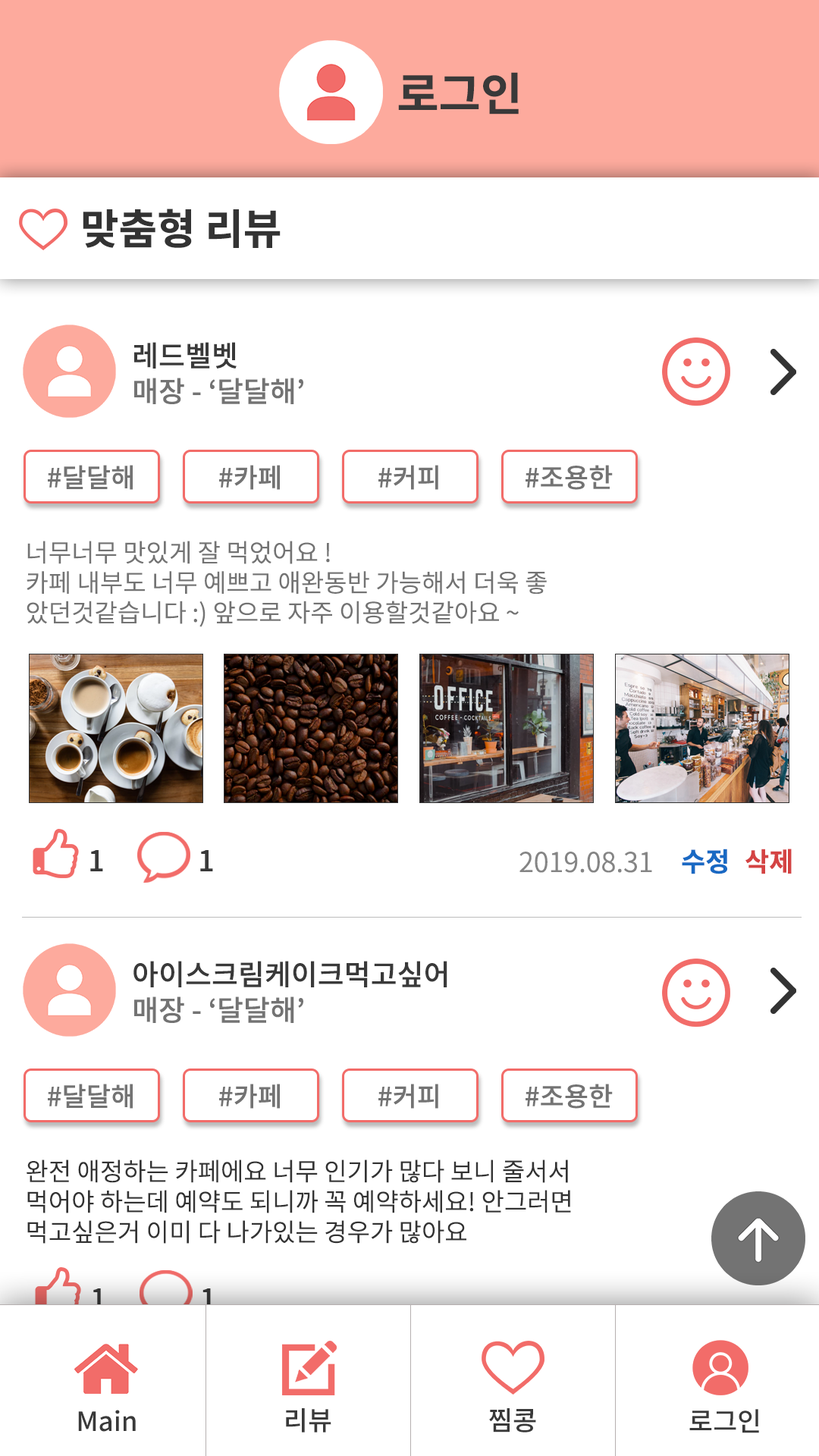
<style>
.page{position:relative;width:819px;height:1456px;background:#ffffff}
.page>*{position:absolute;margin:0}
.t1{font:45.5px "NotoSansCJKkr-Bold";color:#393939}
.t2{font:41.7px "NotoSansCJKkr-Bold";color:#333333}
.t3{font:28.8px "NotoSansCJKkr-Medium";color:#393939}
.t4{font:28.8px "NotoSansCJKkr-Medium";color:#737373}
.t5{font:26.5px "NotoSansCJKkr-Medium";color:#737373}
.t6{font:25px "NotoSansCJKkr-DemiLight";color:#737373}
.t7{font:27.3px "NotoSansCJKkr-DemiLight";color:#858585}
.t8{font:26.5px "NotoSansCJKkr-Bold";color:#1969c3}
.t9{font:26.5px "NotoSansCJKkr-Bold";color:#d44343}
.t10{font:25px/30.3px "NotoSansCJKkr-DemiLight";color:#333333}
.t11{font:28.8px "NotoSansCJKkr-Medium"}
.t12{font:26.5px "NotoSansKR-Medium";color:#393939}
</style>
<div class="page">
<p class="t1" style="left:398px;top:72px;width:121px;height:43px">로그인</p>
<p class="t2" style="left:83px;top:209px;width:198px;height:39px">맞춤형 리뷰</p>
<p class="t3" style="left:134px;top:342px;width:103px;height:27px">레드벨벳</p>
<p class="t4" style="left:134px;top:378px;width:169px;height:26px">매장 - ‘달달해’</p>
<p class="t5" style="left:48px;top:465px;width:85px;height:25px">#달달해</p>
<p class="t5" style="left:219px;top:465px;width:61px;height:25px">#카페</p>
<p class="t5" style="left:378px;top:465px;width:60px;height:25px">#커피</p>
<p class="t5" style="left:526px;top:465px;width:87px;height:25px">#조용한</p>
<p class="t6" style="left:27px;top:541px;width:520px;height:86px">너무너무 맛있게 잘 먹었어요 !<br>카페 내부도 너무 예쁘고 애완동반 가능해서 더욱 좋<br>았던것같습니다 :) 앞으로 자주 이용할것같아요 ~</p>
<p class="t3" style="left:90px;top:850px;width:13px;height:21px">1</p>
<p class="t3" style="left:200px;top:850px;width:13px;height:21px">1</p>
<p class="t7" style="left:519px;top:852px;width:133px;height:21px">2019.08.31</p>
<p class="t8" style="left:682px;top:849px;width:45px;height:25px">수정</p>
<p class="t9" style="left:745px;top:849px;width:47px;height:25px">삭제</p>
<p class="t3" style="left:133px;top:961px;width:314px;height:26px">아이스크림케이크먹고싶어</p>
<p class="t4" style="left:134px;top:996px;width:169px;height:27px">매장 - ‘달달해’</p>
<p class="t5" style="left:48px;top:1084px;width:85px;height:25px">#달달해</p>
<p class="t5" style="left:219px;top:1084px;width:61px;height:25px">#카페</p>
<p class="t5" style="left:378px;top:1084px;width:60px;height:25px">#커피</p>
<p class="t5" style="left:526px;top:1084px;width:87px;height:25px">#조용한</p>
<p class="t10" style="left:27px;top:1159px;width:544px;height:85px">완전 애정하는 카페에요 너무 인기가 많다 보니 줄서서<br>먹어야 하는데 예약도 되니까 꼭 예약하세요! 안그러면<br>먹고싶은거 이미 다 나가있는 경우가 많아요</p>
<p class="t11" style="left:93px;top:1288px;width:12px;height:22px">1</p>
<p class="t3" style="left:202px;top:1288px;width:13px;height:22px">1</p>
<p class="t12" style="left:78px;top:1410px;width:58px;height:22px">Main</p>
<p class="t12" style="left:286px;top:1408px;width:45px;height:24px">리뷰</p>
<p class="t12" style="left:489px;top:1408px;width:47px;height:24px">찜콩</p>
<p class="t12" style="left:689px;top:1409px;width:70px;height:24px">로그인</p>
</div>
